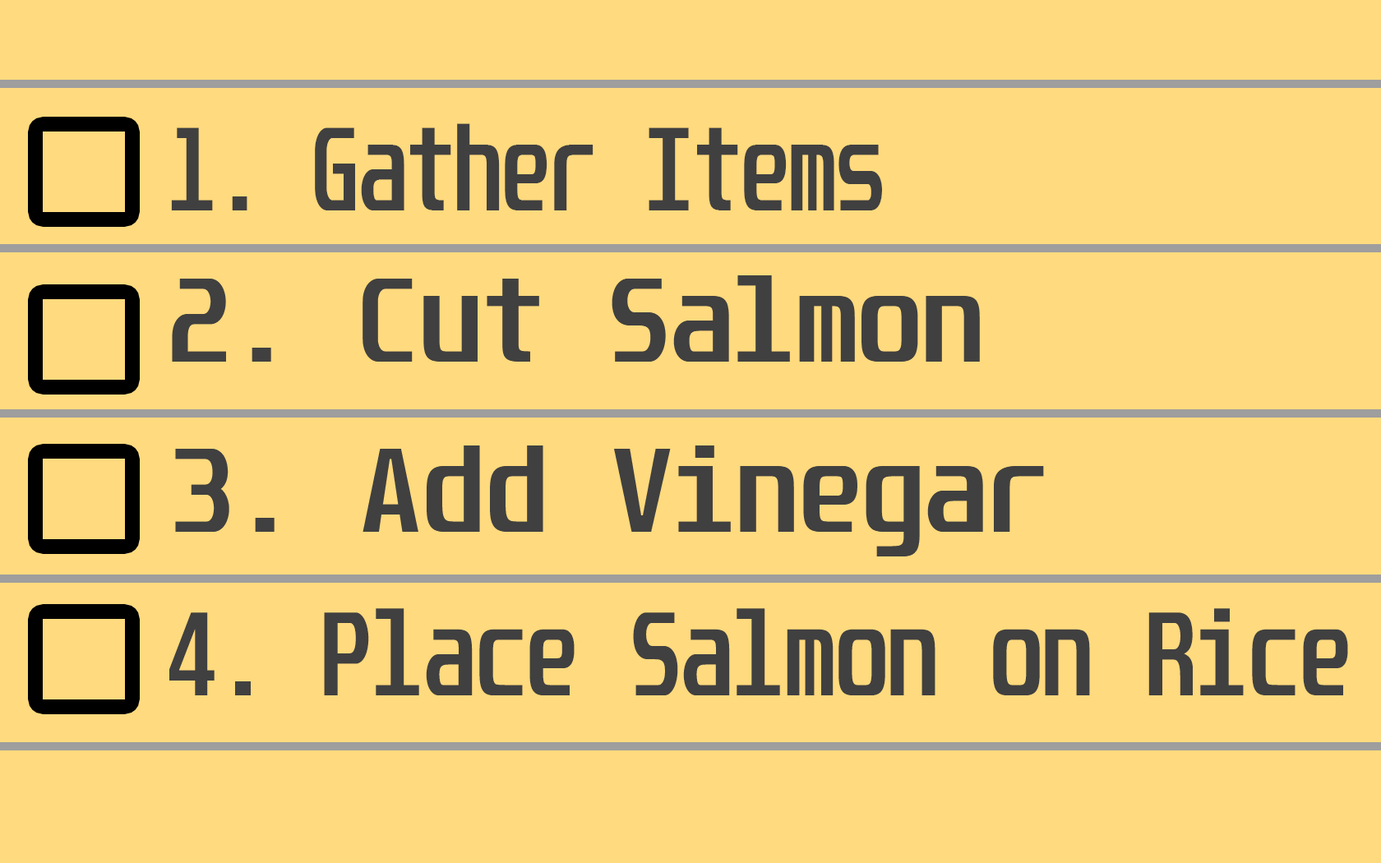
<style>
.page{position:relative;width:1381px;height:863px;background:#ffda7e}
.page>*{position:absolute;margin:0}
.t1{font:102.8px "Unispace-Bold";color:#404040;scale:0.77 1}
.t2{font:102.8px "Unispace-Bold";color:#404040}
.t3{font:102.8px "Unispace-Bold";color:#404040;scale:0.82 1}
</style>
<div class="page">
<p class="t1" style="left:171px;top:123px;width:711px;height:87px">1. Gather Items</p>
<p class="t2" style="left:172px;top:275px;width:808px;height:87px">2. Cut Salmon</p>
<p class="t2" style="left:175px;top:446px;width:869px;height:111px">3. Add Vinegar</p>
<p class="t3" style="left:169px;top:608px;width:1179px;height:88px">4. Place Salmon on Rice</p>
</div>
